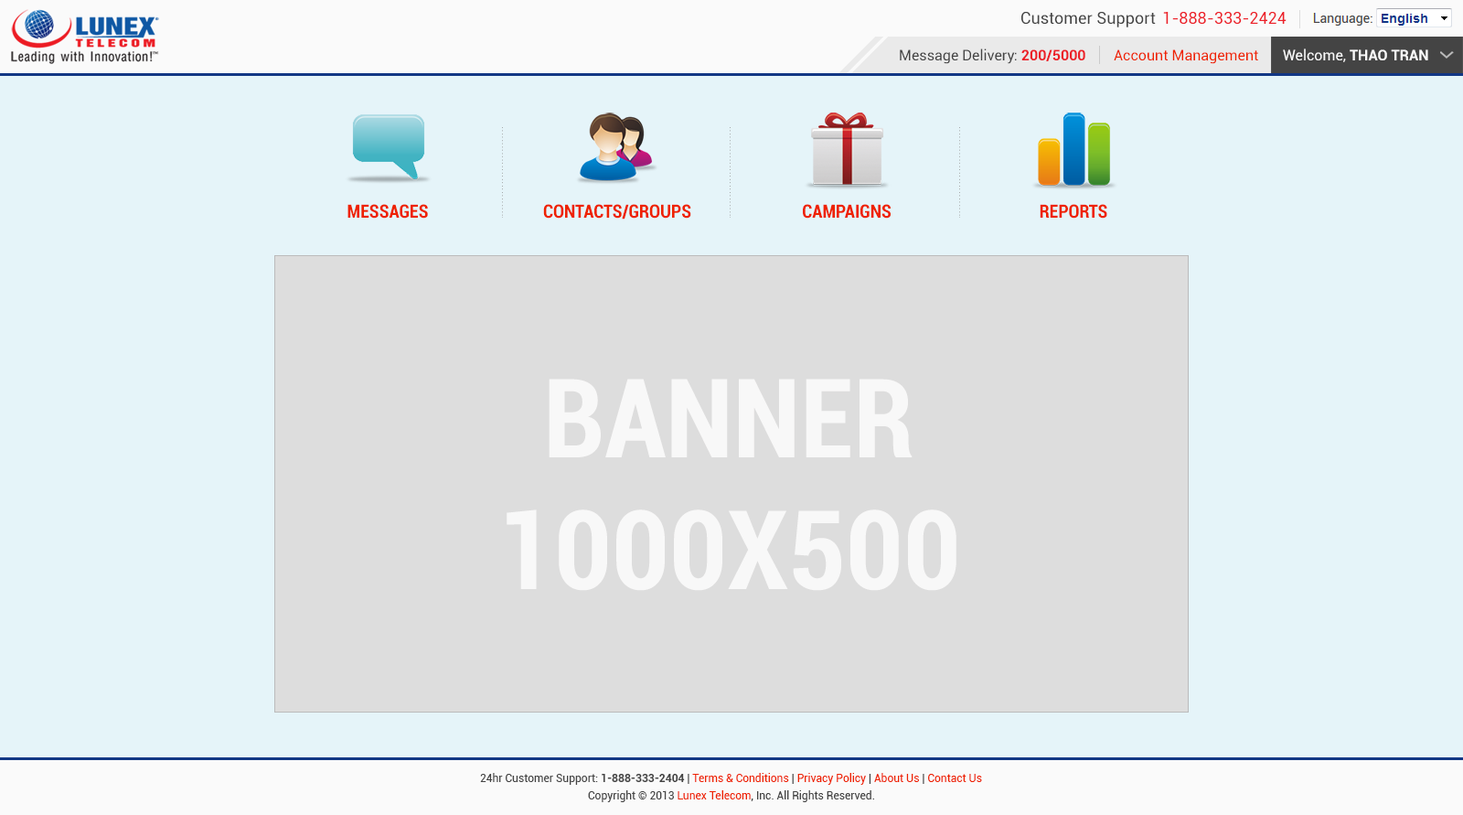
<style>
.page{position:relative;width:1463px;height:815px;background:#e5f4f9}
.page>*{position:absolute;margin:0}
.t1{font:16.5px "Roboto-Regular";color:#444444}
.t2{font:16.5px "Roboto-Regular";color:#ec2029}
.t3{font:14.6px "Roboto-Regular";color:#444444}
.t4{font:14.6px "Roboto-Bold";color:#ec2028}
.t5{font:14.6px "Roboto-Regular";color:#ee2200}
.t6{font:14.6px "Roboto-Bold";color:#fafafa}
.t7{font:14.6px "Roboto-Regular";color:#fafafa}
.t8{font:18.3px "Roboto-BoldCondensed";color:#ee2200}
.t9{font:109.7px "Roboto-BoldCondensed";color:#fffefe}
.t10{font:11px "Roboto-Regular";color:#444444}
.t11{font:11px "Roboto-Bold";color:#444444}
.t12{font:11px "Roboto-Regular";color:#ee2200}
</style>
<div class="page">
<p class="t1" style="left:1022px;top:12px;width:134px;height:15px">Customer Support</p>
<p class="t2" style="left:1163px;top:12px;width:124px;height:12px">1-888-333-2424</p>
<p class="t3" style="left:900px;top:48px;width:186px;height:16px">Message Delivery: <span class="t4">200/5000</span></p>
<p class="t5" style="left:1114px;top:49px;width:144px;height:15px">Account Management</p>
<p class="t6" style="left:1283px;top:48px;width:146px;height:14px"><span class="t7">Welcome, </span>THAO TRAN</p>
<p class="t8" style="left:348px;top:204px;width:80px;height:15px">MESSAGES</p>
<p class="t8" style="left:543px;top:204px;width:148px;height:15px">CONTACTS/GROUPS</p>
<p class="t8" style="left:803px;top:204px;width:88px;height:15px">CAMPAIGNS</p>
<p class="t8" style="left:1040px;top:204px;width:68px;height:15px">REPORTS</p>
<p class="t9" style="left:507px;top:379px;width:450px;height:212px;text-align:center;opacity:0.8">BANNER<br>1000X500</p>
<p class="t10" style="left:480px;top:773px;width:502px;height:12px">24hr Customer Support: <span class="t11">1-888-333-2404</span> | <span class="t12">Terms &amp; Conditions</span> | <span class="t12">Privacy Policy</span> | <span class="t12">About Us</span> | <span class="t12">Contact Us</span></p>
<p class="t10" style="left:588px;top:790px;width:286px;height:12px">Copyright © 2013 <span class="t12">Lunex Telecom</span>, Inc. All Rights Reserved.</p>
</div>
